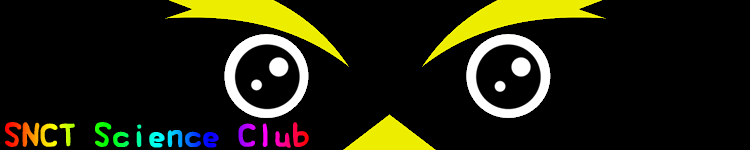
<style>
.page{position:relative;width:750px;height:150px;background:#000000}
.page>*{position:absolute;margin:0}
.t1{font:36px "ElmerFont"}
</style>
<div class="page">
<p class="t1" style="left:5px;top:122px;width:304px;height:26px">SNCT Science Club</p>
</div>
